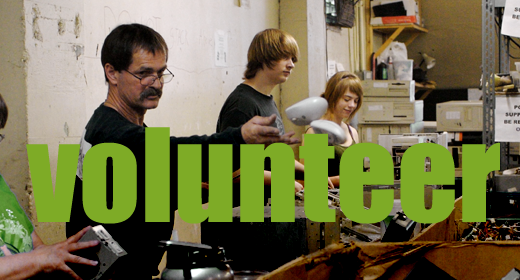
<style>
.page{position:relative;width:520px;height:280px}
.page>*{position:absolute;margin:0}
.t1{font:120px "Impact";color:#7eab26}
</style>
<div class="page">
<p class="t1" style="left:26px;top:127px;width:474px;height:97px">volunteer</p>
</div>
